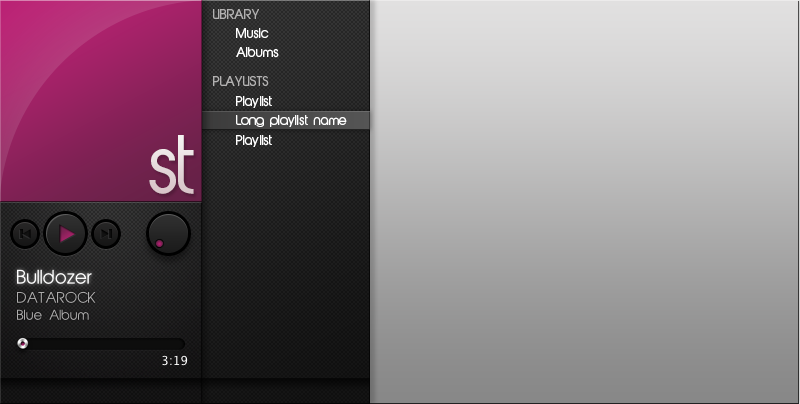
<style>
.page{position:relative;width:800px;height:404px}
.page>*{position:absolute;margin:0}
.t1{font:12px "AbeatbyKai";color:#b3b2b2}
.t2{font:12px "AbeatbyKai";color:#ffffff}
</style>
<div class="page">
<p class="t1" style="left:213px;top:9px;width:46px;height:10px">LIBRARY</p>
<p class="t2" style="left:236px;top:28px;width:33px;height:11px">Music</p>
<p class="t2" style="left:236px;top:47px;width:43px;height:11px">Albums</p>
<p class="t1" style="left:213px;top:76px;width:56px;height:10px">PLAYLISTS</p>
<p class="t2" style="left:236px;top:96px;width:36px;height:12px">Playlist</p>
<p class="t2" style="left:236px;top:115px;width:111px;height:12px">Long playlist name</p>
<p class="t2" style="left:236px;top:135px;width:36px;height:12px">Playlist</p>
</div>
